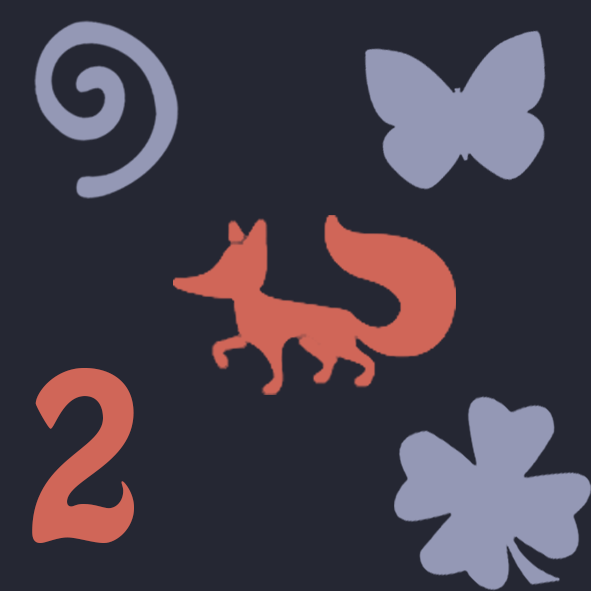
<style>
.page{position:relative;width:591px;height:591px;background:#252733}
.page>*{position:absolute;margin:0}
.t1{font:208.3px "HoboStd";color:#d06658}
</style>
<div class="page">
<p class="t1" style="left:32px;top:368px;width:102px;height:175px">2</p>
</div>
